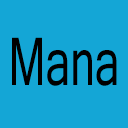
<style>
.page{position:relative;width:128px;height:128px;background:#14a6d6}
.page>*{position:absolute;margin:0}
.t1{font:71.5px "Gautami";color:#000000;scale:0.67 1}
</style>
<div class="page">
<p class="t1" style="left:12px;top:37px;width:105px;height:49px">Mana</p>
</div>
